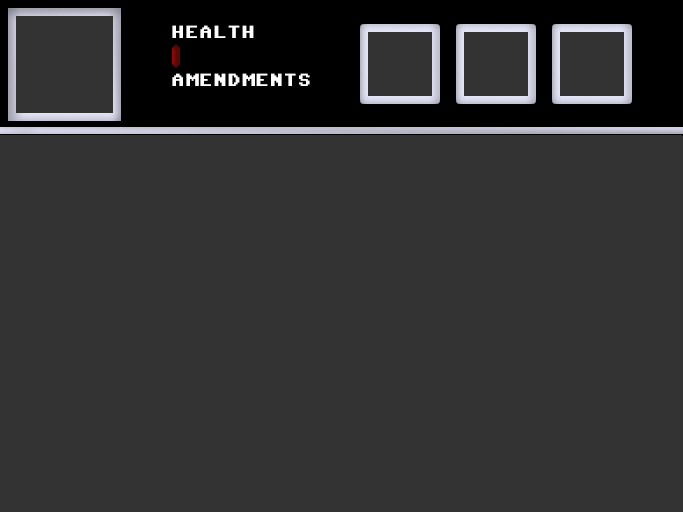
<style>
.page{position:relative;width:683px;height:512px;background:#333333}
.page>*{position:absolute;margin:0}
.t1{font:18px "Commodore-64-Pixelized";color:#ffffff}
</style>
<div class="page">
<p class="t1" style="left:172px;top:25px;width:82px;height:13px">HEALTH</p>
<p class="t1" style="left:172px;top:73px;width:138px;height:13px">AMENDMENTS</p>
</div>
